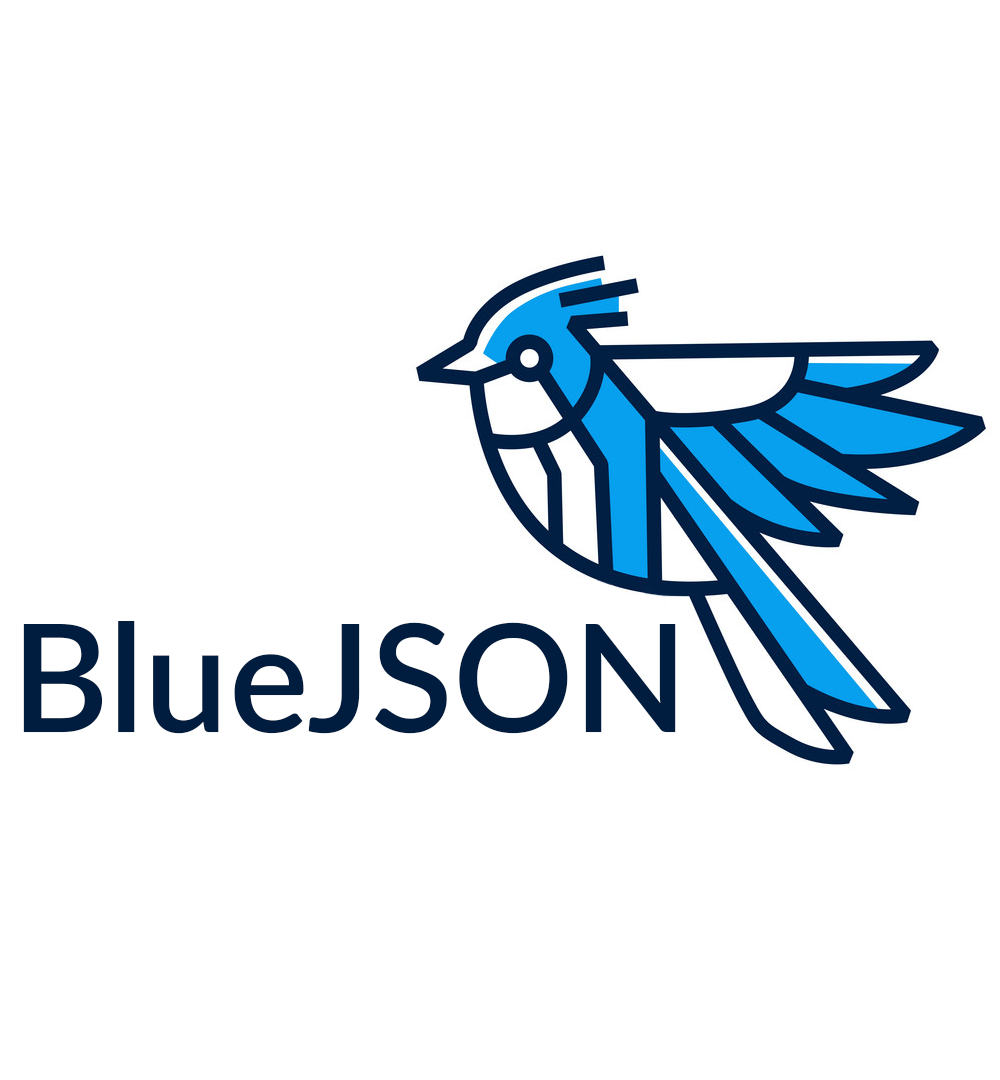
<style>
.page{position:relative;width:1000px;height:1080px;background:#ffffff}
.page>*{position:absolute;margin:0}
.t1{font:150px "Lato-Semibold";color:#001d3f}
</style>
<div class="page">
<p class="t1" style="left:23px;top:621px;width:653px;height:113px">BlueJSON</p>
</div>
